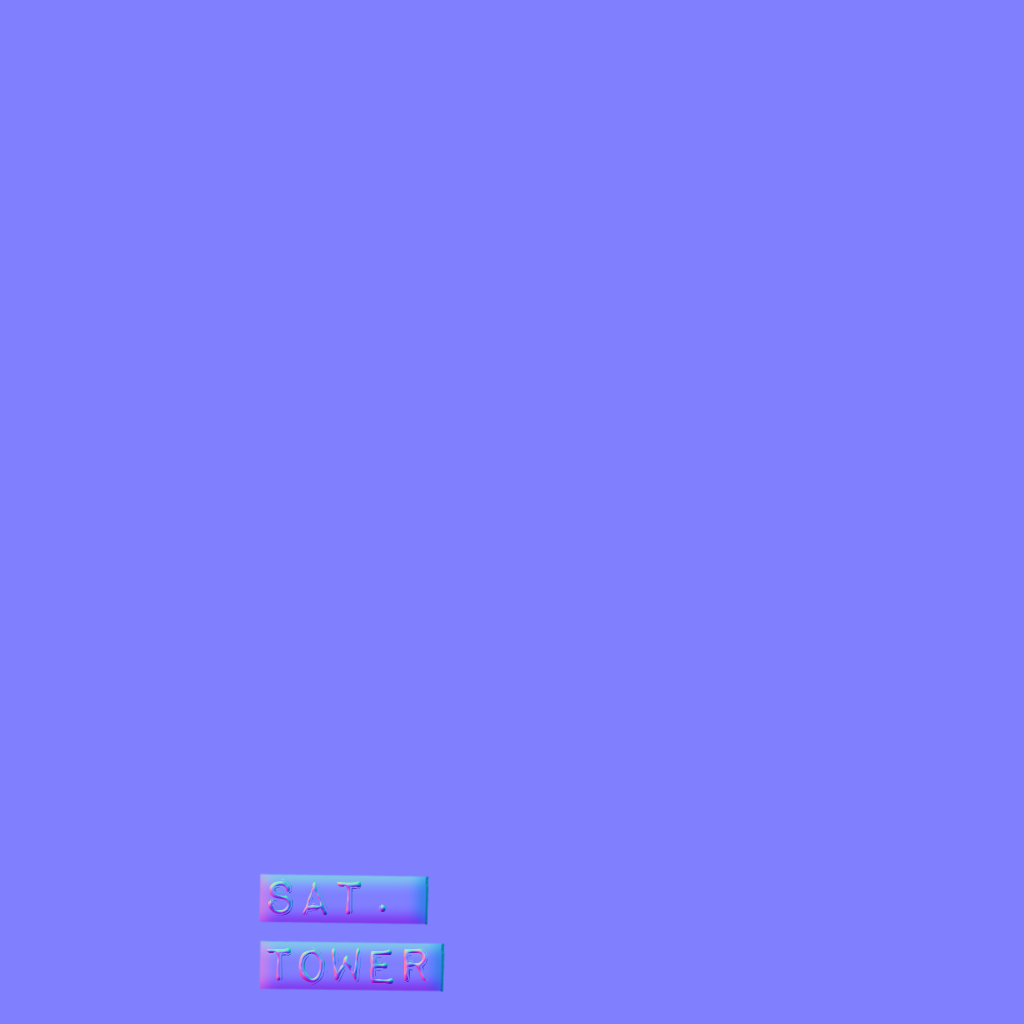
<style>
.page{position:relative;width:1024px;height:1024px;background:#8080ff}
.page>*{position:absolute;margin:0}
.t1{font:65px "ImpactLabelRev";letter-spacing:-0.075em}
</style>
<div class="page">
<p class="t1" style="left:268px;top:878px;width:119px;height:38px;rotate:1deg">sat.</p>
<p class="t1" style="left:266px;top:947px;width:162px;height:38px">tower</p>
</div>
